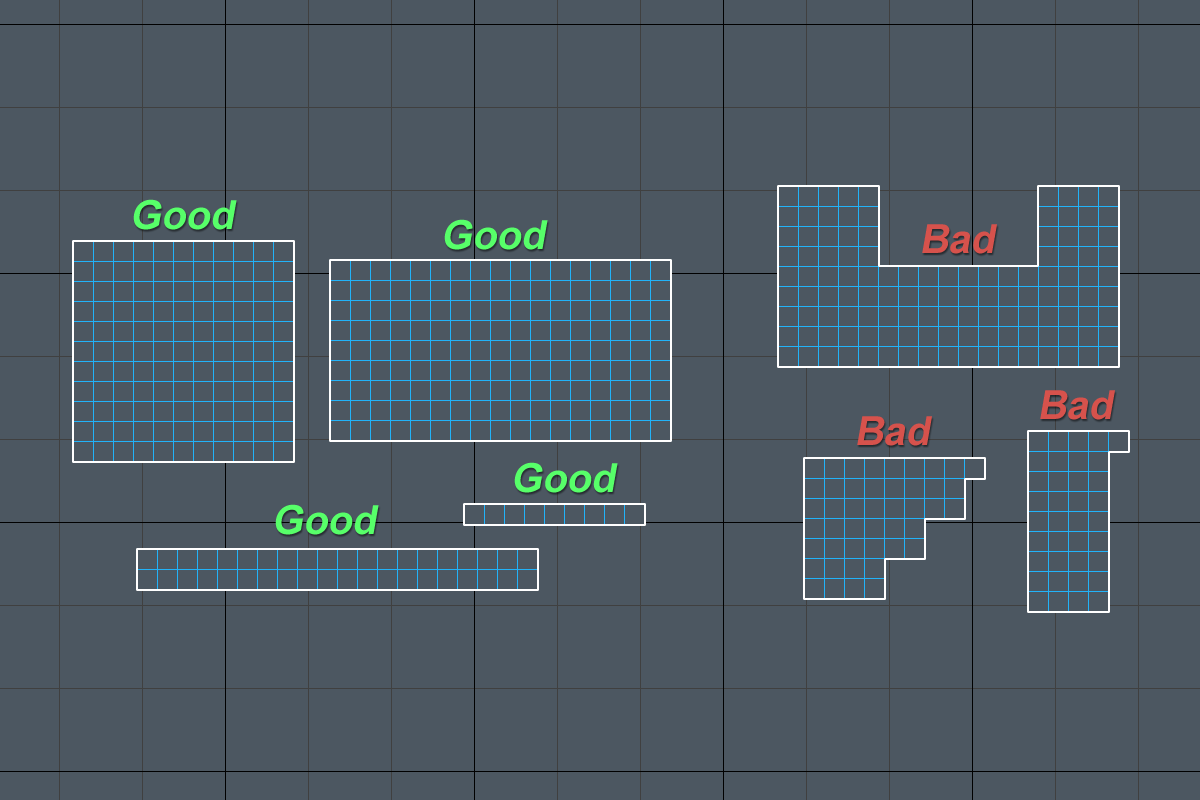
<style>
.page{position:relative;width:1200px;height:800px;background:#4c5761}
.page>*{position:absolute;margin:0}
.t1{font:40px "Arial-BoldMT";color:#57ff69;font-style:italic}
.t2{font:40px "Arial-BoldMT";color:#d6524c;font-style:italic}
</style>
<div class="page">
<p class="t1" style="left:133px;top:199px;width:104px;height:31px">Good</p>
<p class="t1" style="left:444px;top:219px;width:104px;height:31px">Good</p>
<p class="t2" style="left:922px;top:224px;width:75px;height:30px">Bad</p>
<p class="t2" style="left:1040px;top:390px;width:75px;height:30px">Bad</p>
<p class="t2" style="left:857px;top:416px;width:75px;height:30px">Bad</p>
<p class="t1" style="left:514px;top:462px;width:104px;height:31px">Good</p>
<p class="t1" style="left:275px;top:504px;width:104px;height:31px">Good</p>
</div>
